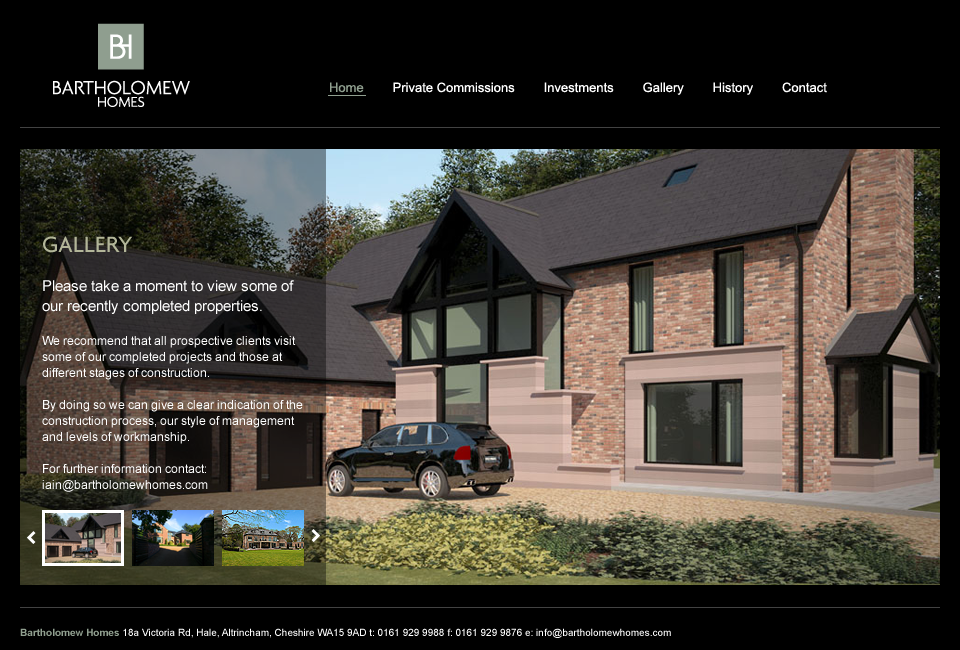
<style>
.page{position:relative;width:960px;height:650px;background:#000000}
.page>*{position:absolute;margin:0}
.t1{font:13px "ArialMT";color:#ffffff}
.t2{font:13px "ArialMT";color:#909f8f}
.t3{font:12.6px/16px "ArialMT";color:#ffffff;scale:0.96 1}
.t4{font:24px/11px "Agenda-Medium";color:#b3b699}
.t5{font:15px/12px "ArialMT";color:#ffffff}
.t6{font:15px/20px "ArialMT";color:#ffffff}
.t7{font:15px "ArialMT";color:#ffffff}
.t8{font:10px "ArialMT";color:#ffffff}
.t9{font:10px "Arial-BoldMT";color:#909f8f}
</style>
<div class="page">
<p class="t1" style="left:330px;top:82px;width:497px;height:13px"><span class="t2">Home</span>        Private Commissions        Investments        Gallery        History        Contact</p>
<p class="t3" style="left:42px;top:236px;width:261px;height:256px"><span class="t4">GALLERY<br><br></span><span class="t5">Please take a moment to view some of </span><span class="t6">our recently completed properties. <br></span><span class="t7"><br></span>We recommend that all prospective clients visit some of our completed projects and those at different stages of construction.<br><br>By doing so we can give a clear indication of the construction process, our style of management and levels of workmanship.<br><br>For further information contact: iain@bartholomewhomes.com</p>
<p class="t8" style="left:20px;top:628px;width:651px;height:10px"><span class="t9">Bartholomew Homes</span>18a Victoria Rd, Hale, Altrincham, Cheshire WA15 9AD t: 0161 929 9988 f: 0161 929 9876 e: info@bartholomewhomes.com</p>
</div>
